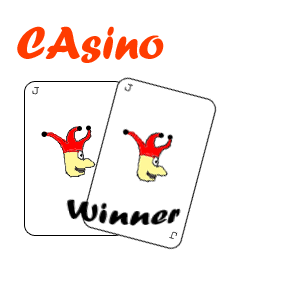
<style>
.page{position:relative;width:300px;height:300px;background:#ffffff}
.page>*{position:absolute;margin:0}
.t1{font:48px "ForteMT";color:#ff3c00}
.t2{font:12px "Courier"}
</style>
<div class="page">
<p class="t1" style="left:17px;top:26px;width:147px;height:37px">CAsino</p>
<p class="t2" style="left:32px;top:87px;width:7px;height:8px">J</p>
<p class="t2" style="left:169px;top:231px;width:8px;height:8px;rotate:-164deg">J</p>
</div>
